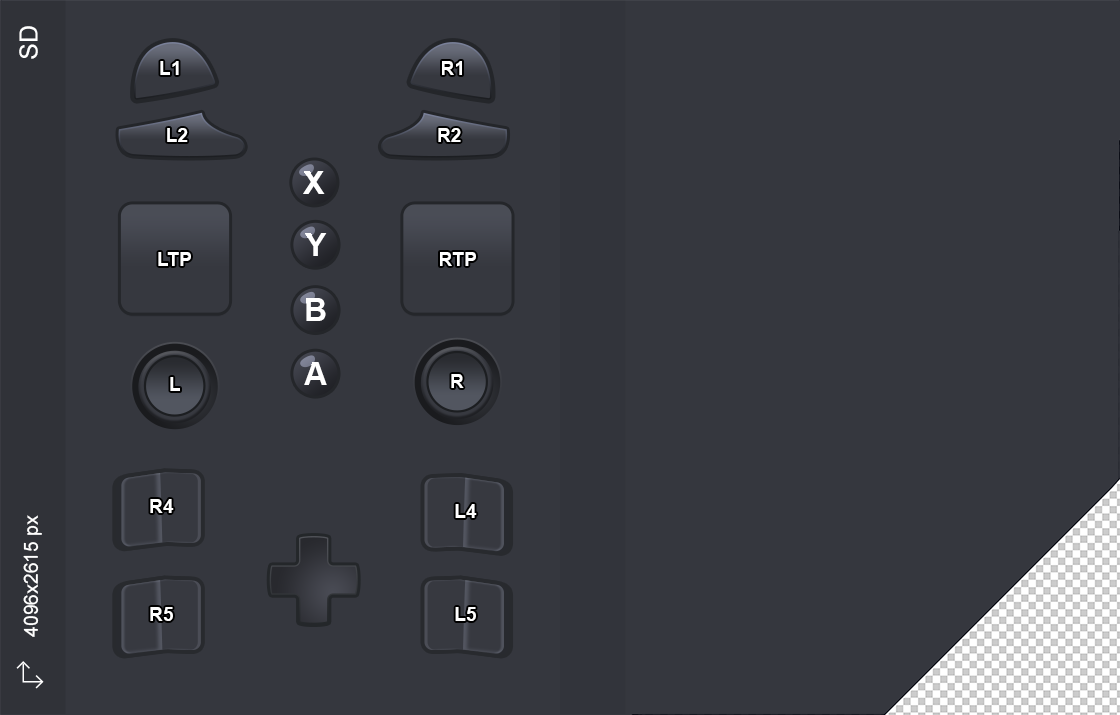
<style>
.page{position:relative;width:1120px;height:715px;background:#35373e}
.page>*{position:absolute;margin:0}
.t1{font:25px "ArialMT";color:#ffffff}
.t2{font:19.3px "Arial-BoldMT";color:#ffffff}
.t3{font:32.4px "Arial-BoldMT";color:#ffffff}
.t4{font:19.6px "ArialMT";color:#ffffff}
</style>
<div class="page">
<p class="t1" style="left:19px;top:26px;width:19px;height:33px;rotate:-90deg">SD</p>
<p class="t2" style="left:160px;top:61px;width:19px;height:14px">L1</p>
<p class="t2" style="left:442px;top:61px;width:20px;height:14px">R1</p>
<p class="t2" style="left:167px;top:128px;width:21px;height:14px">L2</p>
<p class="t2" style="left:438px;top:128px;width:23px;height:14px">R2</p>
<p class="t3" style="left:303px;top:171px;width:22px;height:23px">X</p>
<p class="t3" style="left:305px;top:233px;width:22px;height:23px">Y</p>
<p class="t2" style="left:158px;top:252px;width:33px;height:14px">LTP</p>
<p class="t2" style="left:440px;top:252px;width:36px;height:14px">RTP</p>
<p class="t3" style="left:306px;top:298px;width:20px;height:23px">B</p>
<p class="t3" style="left:304px;top:362px;width:23px;height:23px">A</p>
<p class="t2" style="left:170px;top:377px;width:10px;height:14px">L</p>
<p class="t2" style="left:451px;top:374px;width:13px;height:14px">R</p>
<p class="t2" style="left:150px;top:499px;width:24px;height:14px">R4</p>
<p class="t2" style="left:455px;top:504px;width:22px;height:14px">L4</p>
<p class="t4" style="left:23px;top:515px;width:19px;height:122px;rotate:-90deg">4096x2615 px</p>
<p class="t2" style="left:150px;top:607px;width:23px;height:14px">R5</p>
<p class="t2" style="left:455px;top:607px;width:21px;height:14px">L5</p>
</div>
